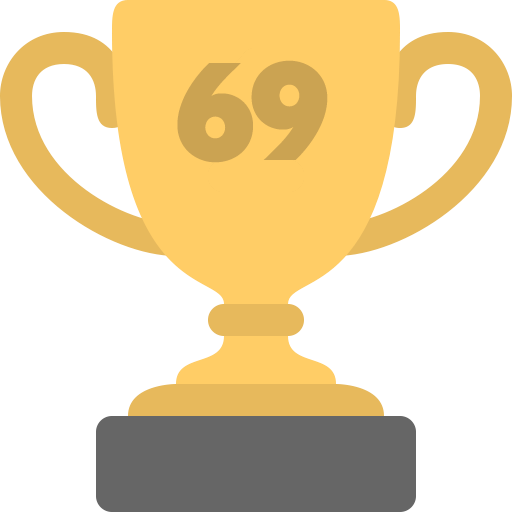
<style>
.page{position:relative;width:512px;height:512px;background:#ffffff}
.page>*{position:absolute;margin:0}
.t1{font:148.2px "Sen-ExtraBold";letter-spacing:-0.075em;color:#cca352}
</style>
<div class="page">
<p class="t1" style="left:177px;top:60px;width:151px;height:103px">69</p>
</div>
